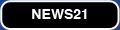
<style>
.page{position:relative;width:120px;height:30px;background:#000000}
.page>*{position:absolute;margin:0}
.t1{font:14px "Helvetica-Bold";color:#ffffff}
</style>
<div class="page">
<p class="t1" style="left:32px;top:9px;width:55px;height:10px">NEWS21</p>
</div>
